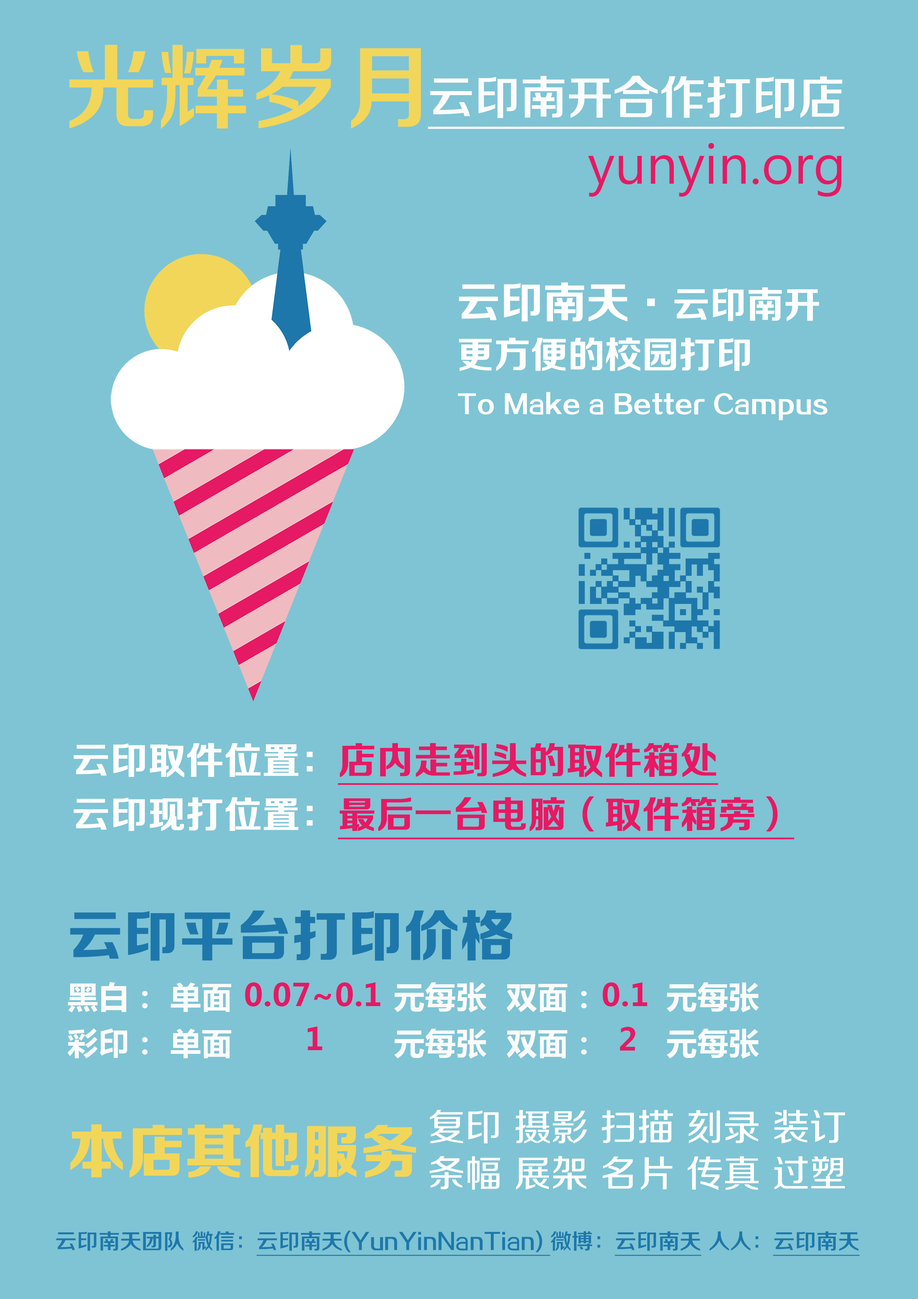
<style>
.page{position:relative;width:918px;height:1299px;background:#7ec4d4}
.page>*{position:absolute;margin:0}
.t1{font:92.6px "FZZZHONGJW--GB1-0";color:#f2d659}
.t2{font:46.3px "FZZZHONGJW--GB1-0";color:#fcfcfc;text-decoration:underline}
.t3{font:55.5px "KhmerUI";color:#e61964}
.t4{font:24.7px/55.5px "FZZCHJW--GB1-0";color:#ffffff}
.t5{font:43.2px/55.5px "FZZCHJW--GB1-0";color:#ffffff}
.t6{font:37px/55.5px "FZZCHJW--GB1-0";color:#ffffff}
.t7{font:37px "FZZZHONGJW--GB1-0";color:#e61964;font-weight:bold;text-decoration:underline}
.t8{font:37px "FZZZHONGJW--GB1-0";color:#ffffff;font-weight:bold}
.t9{font:30.9px "MicrosoftYaHei-Bold";letter-spacing:0.01em;color:#e61964}
.t10{font:37px/46.3px "FZZZHUNHJW--GB1-0";color:#ffffff}
.t11{font:58.6px "FZZDHJW--GB1-0";color:#f2d659}
.t12{font:21.6px "FZZZHONGJW--GB1-0";color:#1d77ab;text-decoration:underline}
.t13{font:21.6px "FZZZHONGJW--GB1-0";color:#1d77ab}
</style>
<div class="page">
<p class="t1" style="left:69px;top:45px;width:352px;height:84px">光辉岁月</p>
<p class="t2" style="left:428px;top:76px;width:417px;height:53px">云印南开合作打印店</p>
<p class="t3" style="left:588px;top:143px;width:254px;height:54px">yunyin.org</p>
<p class="t4" style="left:458px;top:282px;width:370px;height:138px"><span class="t5">云印南天·</span><span class="t6">云印南开<br>更方便的校园打印<br></span>To Make a Better Campus</p>
<p class="t7" style="left:74px;top:743px;width:644px;height:42px"><span class="t8">云印取件位置：</span>店内走到头的取件箱处</p>
<p class="t7" style="left:74px;top:796px;width:720px;height:43px"><span class="t8">云印现打位置：</span>最后一台电脑（取件箱旁）</p>
<p class="t9" style="left:245px;top:982px;width:136px;height:24px">0.07~0.1</p>
<p class="t9" style="left:603px;top:982px;width:45px;height:24px">0.1</p>
<p class="t9" style="left:308px;top:1026px;width:14px;height:24px">1</p>
<p class="t9" style="left:620px;top:1027px;width:16px;height:23px">2</p>
<p class="t10" style="left:429px;top:1110px;width:416px;height:80px">复印 摄影 扫描 刻录 装订 <br>条幅 展架 名片 传真 过塑</p>
<p class="t11" style="left:70px;top:1124px;width:346px;height:54px">本店其他服务</p>
<p class="t12" style="left:56px;top:1230px;width:804px;height:26px"><span class="t13">云印南天团队 微信：</span>云印南天(YunYinNanTian) <span class="t13">微博：</span>云印南天<span class="t13"> 人人：</span>云印南天</p>
</div>
